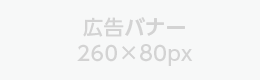
<style>
.page{position:relative;width:260px;height:80px;background:#f7f8f8}
.page>*{position:absolute;margin:0}
.t1{font:20.4px/25.3px "UDShinGoPro-Medium";letter-spacing:0.02em;color:#d3d3d3}
</style>
<div class="page">
<p class="t1" style="left:77px;top:17px;width:116px;height:49px;text-align:center">広告バナー<br>260×80px</p>
</div>
